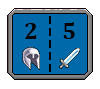
<style>
.page{position:relative;width:100px;height:89px;background:#0069aa}
.page>*{position:absolute;margin:0}
.t1{font:24px "Cambria-Bold";color:#000000}
</style>
<div class="page">
<p class="t1" style="left:25px;top:23px;width:12px;height:16px">2</p>
<p class="t1" style="left:63px;top:22px;width:12px;height:17px">5</p>
</div>
